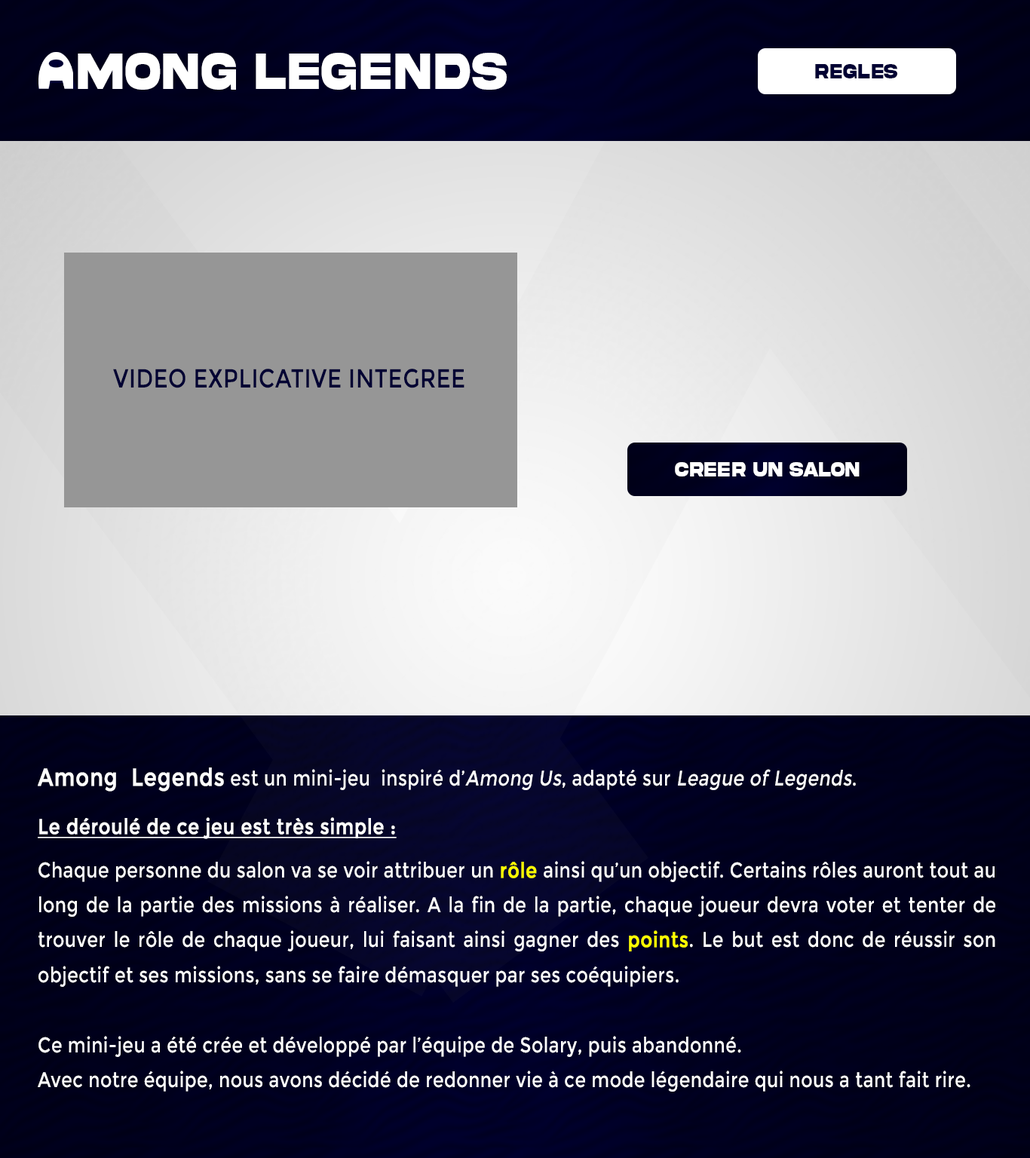
<style>
.page{position:relative;width:1030px;height:1158px}
.page>*{position:absolute;margin:0}
.t1{font:54.3px "AkiraExpanded-SuperBold";letter-spacing:0.005em;color:#ffffff;scale:0.71 1}
.t2{font:54.3px "AkiraExpanded-SuperBold";letter-spacing:0.005em;color:#000033;scale:0.71 1}
.t3{font:21.3px "AkiraExpanded-SuperBold";letter-spacing:0.01em;color:#000033;scale:0.71 1}
.t4{font:26.2px "Montserrat-Regular";letter-spacing:0.02em;color:#000033;scale:0.83 1}
.t5{font:21.3px "AkiraExpanded-SuperBold";letter-spacing:0.005em;color:#ffffff;scale:0.71 1}
.t6{font:21.3px/35px "Montserrat-Regular";letter-spacing:0.02em;color:#ffffff;scale:0.83 1}
.t7{font:24.4px/35px "Montserrat-Regular";letter-spacing:0.02em;color:#ffffff;font-weight:bold;scale:0.83 1}
.t8{font:21.3px/35px "Montserrat-Regular";letter-spacing:0.02em;color:#ffffff;font-style:italic;scale:0.83 1}
.t9{font:21.3px/35px "Montserrat-Regular";letter-spacing:0.02em;color:#ffffff;font-weight:bold;text-decoration:underline;scale:0.83 1}
.t10{font:21.3px/35px "Montserrat-Regular";letter-spacing:0.02em;color:#ffff00;font-weight:bold;scale:0.83 1}
</style>
<div class="page">
<p class="t1" style="left:38px;top:53px;width:469px;height:37px"><span class="t2">A</span>MONG LEGENDS</p>
<p class="t3" style="left:815px;top:64px;width:82px;height:14px">REGLES</p>
<p class="t4" style="left:113px;top:369px;width:351px;height:19px">VIDEO EXPLICATIVE INTEGREE</p>
<p class="t5" style="left:675px;top:462px;width:184px;height:14px">CREER UN SALON</p>
<p class="t6" style="left:38px;top:767px;width:957px;height:325px;text-align:justify"><span class="t7">Among  Legends</span> est un mini-jeu  inspiré d’<span class="t8">Among Us</span>, adapté sur <span class="t8">League of Legends</span>.<br><span class="t9">Le déroulé de ce jeu est très simple :<br></span>Chaque personne du salon va se voir attribuer un <span class="t10">rôle </span>ainsi qu’un objectif. Certains rôles auront tout au long de la partie des missions à réaliser. A la fin de la partie, chaque joueur devra voter et tenter de trouver le rôle de chaque joueur, lui faisant ainsi gagner des <span class="t10">points</span>. Le but est donc de réussir son objectif et ses missions, sans se faire démasquer par ses coéquipiers.<br><br>Ce mini-jeu a été crée et développé par l’équipe de Solary, puis abandonné.<br>Avec notre équipe, nous avons décidé de redonner vie à ce mode légendaire qui nous a tant fait rire.</p>
</div>
